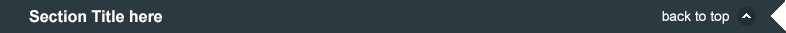
<style>
.page{position:relative;width:786px;height:33px;background:#2b3a41}
.page>*{position:absolute;margin:0}
.t1{font:16.2px "Arial-BoldMT";color:#ffffff}
.t2{font:14px "ArialMT";color:#ffffff}
</style>
<div class="page">
<p class="t1" style="left:29px;top:10px;width:133px;height:13px">Section Title here</p>
<p class="t2" style="left:662px;top:11px;width:67px;height:13px">back to top</p>
</div>
